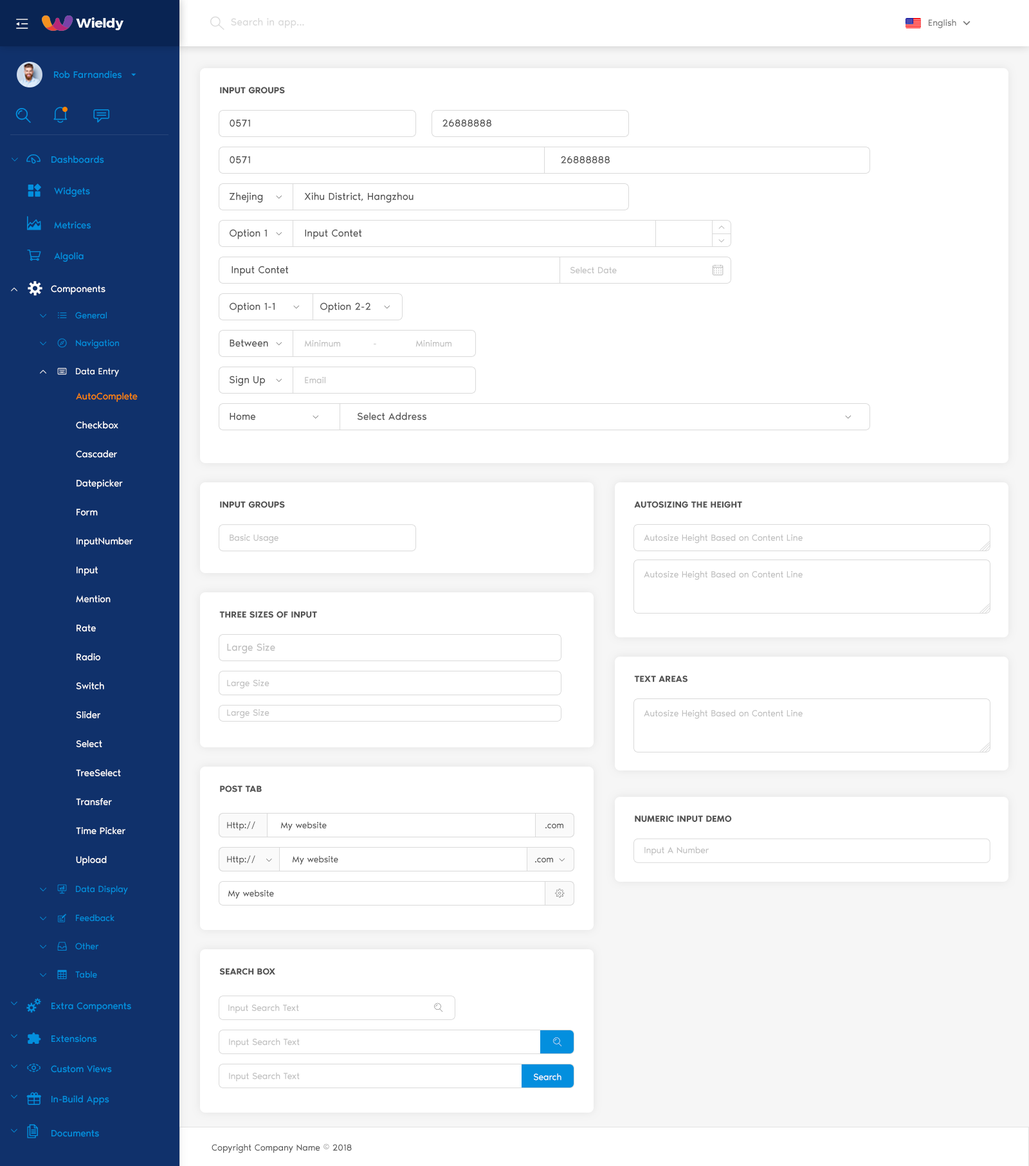
<style>
.page{position:relative;width:1029px;height:1166px;background:#ffffff}
.page>*{position:absolute;margin:0}
.t1{font:10.3px "NoirPro-Regular";color:#d9d9d9}
.t2{font:9px "NoirPro-Regular";color:#757575}
.t3{font:9.6px "NoirPro-Regular";color:#038fde}
.t4{font:9px "NoirPro-SemiBold";color:#535353;text-transform:uppercase}
.t5{font:10.3px "NoirPro-Regular";color:#545454}
.t6{font:7.7px "gaxonant"}
.t7{font:14.1px "gaxonant";color:#038fde}
.t8{font:10.3px "gaxondrift"}
.t9{font:9px "NoirPro-Regular";color:#bfbfbf}
.t10{font:10.3px "gaxondrift";color:#9b9b9b}
.t11{font:14.1px "gaxonant";color:#ffffff}
.t12{font:9.6px "NoirPro-Regular";color:#ffffff}
.t13{font:7.7px "gaxonant";color:#038fde}
.t14{font:9px "gaxonant";color:#038fde}
.t15{font:9px "NoirPro-Regular";color:#038fde}
.t16{font:9px "NoirPro-Regular"}
.t17{font:9px "gaxonant";color:#ffffff}
.t18{font:9px "NoirPro-Regular";color:#ffffff}
.t19{font:9.6px/25.7px "NoirPro-Regular";color:#ffffff}
.t20{font:9.6px/25.7px "NoirPro-Regular";color:#ff8400}
.t21{font:10.3px "NoirPro-Regular";color:#bfbfbf}
.t22{font:9px "NoirPro-Regular";color:#545454}
.t23{font:7.5px "gaxonant";color:#038fde}
.t24{font:9px "NoirPro-Regular";color:#595959}
</style>
<div class="page">
<p class="t1" style="left:231px;top:18px;width:73px;height:10px">Search in app...</p>
<p class="t2" style="left:928px;top:19px;width:28px;height:9px">English</p>
<p class="t3" style="left:54px;top:71px;width:68px;height:7px">Rob Farnandies</p>
<p class="t4" style="left:220px;top:87px;width:65px;height:7px">Input Groups</p>
<p class="t5" style="left:230px;top:119px;width:20px;height:8px">0571</p>
<p class="t5" style="left:442px;top:119px;width:49px;height:8px">26888888</p>
<p class="t6" style="left:12px;top:158px;width:6px;height:3px">2</p>
<p class="t7" style="left:26px;top:154px;width:14px;height:10px">-</p>
<p class="t3" style="left:51px;top:156px;width:53px;height:7px">Dashboards</p>
<p class="t5" style="left:230px;top:156px;width:20px;height:7px">0571</p>
<p class="t5" style="left:561px;top:156px;width:48px;height:7px">26888888</p>
<p class="t3" style="left:54px;top:187px;width:36px;height:10px">Widgets</p>
<p class="t5" style="left:229px;top:192px;width:34px;height:11px">Zhejing</p>
<p class="t8" style="left:276px;top:195px;width:6px;height:4px">0</p>
<p class="t5" style="left:304px;top:192px;width:109px;height:11px">Xihu District, Hangzhou</p>
<p class="t7" style="left:27px;top:216px;width:14px;height:14px">m</p>
<p class="t3" style="left:54px;top:221px;width:37px;height:8px">Metrices</p>
<p class="t5" style="left:230px;top:229px;width:37px;height:10px">Option 1</p>
<p class="t8" style="left:276px;top:232px;width:6px;height:3px">0</p>
<p class="t5" style="left:305px;top:229px;width:56px;height:10px">Input Contet</p>
<p class="t8" style="left:718px;top:226px;width:6px;height:3px">3</p>
<p class="t8" style="left:718px;top:239px;width:6px;height:3px">0</p>
<p class="t3" style="left:54px;top:252px;width:30px;height:10px">Algolia</p>
<p class="t5" style="left:231px;top:266px;width:57px;height:10px">Input Contet</p>
<p class="t9" style="left:570px;top:267px;width:46px;height:6px">Select Date</p>
<p class="t10" style="left:712px;top:264px;width:11px;height:11px">G</p>
<p class="t11" style="left:28px;top:281px;width:14px;height:15px">%</p>
<p class="t6" style="left:11px;top:287px;width:6px;height:4px">5</p>
<p class="t12" style="left:51px;top:285px;width:54px;height:9px">Components</p>
<p class="t5" style="left:230px;top:302px;width:44px;height:10px">Option 1-1</p>
<p class="t8" style="left:293px;top:305px;width:7px;height:4px">0</p>
<p class="t5" style="left:320px;top:302px;width:50px;height:10px">Option 2-2</p>
<p class="t8" style="left:384px;top:305px;width:6px;height:4px">0</p>
<p class="t13" style="left:40px;top:314px;width:6px;height:4px">2</p>
<p class="t14" style="left:58px;top:312px;width:9px;height:6px">h</p>
<p class="t15" style="left:75px;top:312px;width:32px;height:7px">General</p>
<p class="t13" style="left:40px;top:341px;width:6px;height:4px">2</p>
<p class="t15" style="left:76px;top:339px;width:43px;height:9px">Navigation</p>
<p class="t5" style="left:230px;top:339px;width:38px;height:7px">Between</p>
<p class="t8" style="left:276px;top:342px;width:6px;height:3px">0</p>
<p class="t9" style="left:304px;top:340px;width:36px;height:6px">Minimum</p>
<p class="t9" style="left:415px;top:340px;width:36px;height:6px">Minimum</p>
<p class="t16" style="left:374px;top:343px;width:2px;height:2px">-</p>
<p class="t6" style="left:40px;top:370px;width:6px;height:4px">5</p>
<p class="t17" style="left:57px;top:368px;width:10px;height:7px">/</p>
<p class="t18" style="left:76px;top:368px;width:43px;height:9px">Data Entry</p>
<p class="t5" style="left:230px;top:375px;width:35px;height:11px">Sign Up</p>
<p class="t9" style="left:305px;top:377px;width:20px;height:6px">Email</p>
<p class="t8" style="left:276px;top:379px;width:6px;height:3px">0</p>
<p class="t19" style="left:76px;top:392px;width:62px;height:473px"><span class="t20">AutoComplete<br></span>Checkbox<br>Cascader<br>Datepicker<br>Form<br>InputNumber<br>Input<br>Mention<br>Rate<br>Radio<br>Switch<br>Slider<br>Select<br>TreeSelect<br>Transfer<br>Time Picker<br>Upload</p>
<p class="t5" style="left:230px;top:413px;width:25px;height:7px">Home</p>
<p class="t5" style="left:357px;top:412px;width:69px;height:8px">Select Address</p>
<p class="t8" style="left:312px;top:415px;width:7px;height:4px">0</p>
<p class="t8" style="left:845px;top:415px;width:6px;height:4px">0</p>
<p class="t4" style="left:220px;top:501px;width:65px;height:7px">Input Groups</p>
<p class="t4" style="left:634px;top:501px;width:108px;height:7px">Autosizing The Height</p>
<p class="t9" style="left:644px;top:534px;width:158px;height:9px">Autosize Height Based on Content Line</p>
<p class="t9" style="left:230px;top:534px;width:48px;height:9px">Basic Usage</p>
<p class="t9" style="left:644px;top:570px;width:158px;height:10px">Autosize Height Based on Content Line</p>
<p class="t4" style="left:219px;top:611px;width:98px;height:7px">Three Sizes Of Input</p>
<p class="t21" style="left:227px;top:643px;width:48px;height:10px">Large Size</p>
<p class="t4" style="left:634px;top:675px;width:53px;height:7px">Text Areas</p>
<p class="t9" style="left:227px;top:680px;width:42px;height:8px">Large Size</p>
<p class="t9" style="left:227px;top:709px;width:42px;height:9px">Large Size</p>
<p class="t9" style="left:644px;top:709px;width:158px;height:10px">Autosize Height Based on Content Line</p>
<p class="t4" style="left:220px;top:785px;width:42px;height:7px">Post Tab</p>
<p class="t22" style="left:227px;top:821px;width:28px;height:10px">Http://</p>
<p class="t22" style="left:280px;top:821px;width:47px;height:10px">My website</p>
<p class="t4" style="left:634px;top:815px;width:98px;height:7px">Numeric Input Demo</p>
<p class="t22" style="left:545px;top:823px;width:18px;height:5px">.com</p>
<p class="t22" style="left:227px;top:855px;width:28px;height:10px">Http://</p>
<p class="t22" style="left:292px;top:855px;width:46px;height:10px">My website</p>
<p class="t22" style="left:535px;top:857px;width:18px;height:5px">.com</p>
<p class="t8" style="left:559px;top:858px;width:6px;height:3px">0</p>
<p class="t9" style="left:644px;top:846px;width:64px;height:9px">Input A Number</p>
<p class="t8" style="left:266px;top:858px;width:6px;height:3px">0</p>
<p class="t13" style="left:40px;top:887px;width:6px;height:4px">2</p>
<p class="t14" style="left:57px;top:884px;width:10px;height:10px">.</p>
<p class="t15" style="left:76px;top:885px;width:52px;height:9px">Data Display</p>
<p class="t22" style="left:228px;top:889px;width:46px;height:10px">My website</p>
<p class="t13" style="left:40px;top:916px;width:6px;height:4px">2</p>
<p class="t15" style="left:76px;top:914px;width:38px;height:7px">Feedback</p>
<p class="t13" style="left:40px;top:944px;width:6px;height:4px">2</p>
<p class="t15" style="left:75px;top:942px;width:23px;height:8px">Other</p>
<p class="t13" style="left:40px;top:973px;width:6px;height:4px">2</p>
<p class="t15" style="left:75px;top:971px;width:22px;height:7px">Table</p>
<p class="t4" style="left:219px;top:968px;width:56px;height:7px">Search Box</p>
<p class="t23" style="left:11px;top:1001px;width:6px;height:4px">2</p>
<p class="t3" style="left:51px;top:1002px;width:80px;height:9px">Extra Components</p>
<p class="t9" style="left:228px;top:1004px;width:71px;height:9px">Input Search Text</p>
<p class="t23" style="left:11px;top:1034px;width:6px;height:4px">2</p>
<p class="t3" style="left:51px;top:1034px;width:45px;height:8px">Extensions</p>
<p class="t9" style="left:229px;top:1038px;width:71px;height:9px">Input Search Text</p>
<p class="t23" style="left:11px;top:1064px;width:6px;height:4px">2</p>
<p class="t7" style="left:27px;top:1063px;width:13px;height:9px">,</p>
<p class="t3" style="left:51px;top:1065px;width:61px;height:7px">Custom Views</p>
<p class="t9" style="left:229px;top:1072px;width:71px;height:9px">Input Search Text</p>
<p class="t18" style="left:534px;top:1073px;width:27px;height:7px">Search</p>
<p class="t23" style="left:11px;top:1094px;width:6px;height:4px">2</p>
<p class="t3" style="left:51px;top:1095px;width:58px;height:9px">In-Build Apps</p>
<p class="t23" style="left:11px;top:1128px;width:6px;height:4px">2</p>
<p class="t7" style="left:27px;top:1124px;width:11px;height:14px">)</p>
<p class="t3" style="left:51px;top:1130px;width:48px;height:7px">Documents</p>
<p class="t24" style="left:212px;top:1143px;width:140px;height:10px">Copyright Company Name © 2018</p>
</div>
